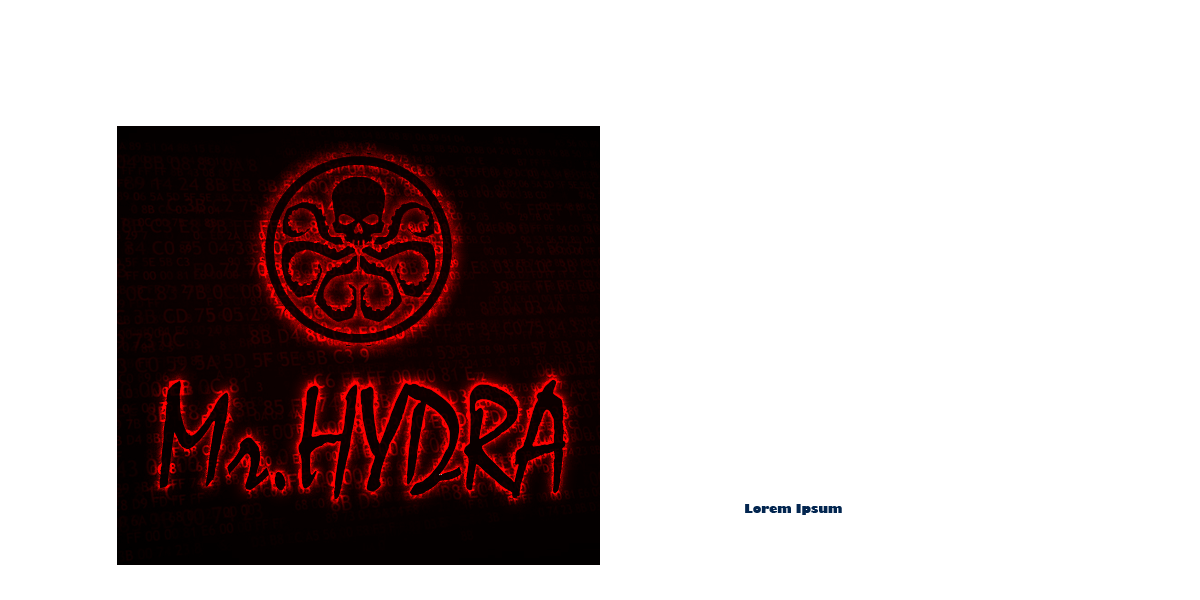
<style>
.page{position:relative;width:1200px;height:600px;background:#ffffff}
.page>*{position:absolute;margin:0}
.t1{font:153.4px "Mistral";color:#0c0000;scale:0.79 1}
.t2{font:12px "GillSans-UltraBold";color:#032650}
</style>
<div class="page">
<p class="t1" style="left:159px;top:379px;width:407px;height:121px">Mr.HYDRA</p>
<p class="t1" style="left:159px;top:379px;width:407px;height:121px">Mr.HYDRA</p>
<p class="t2" style="left:745px;top:504px;width:97px;height:11px">Lorem Ipsum</p>
</div>
